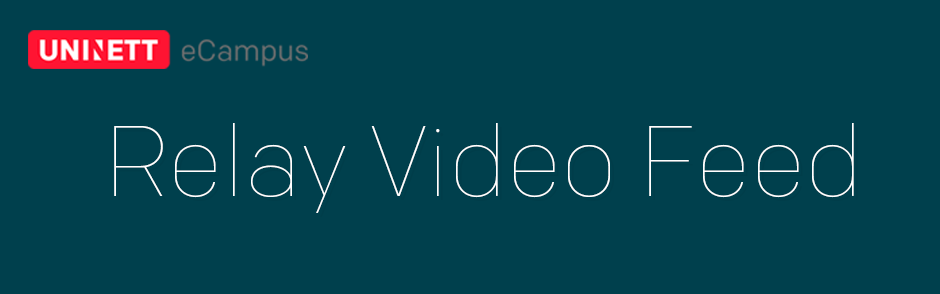
<style>
.page{position:relative;width:940px;height:294px;background:#00404d}
.page>*{position:absolute;margin:0}
.t1{font:100px "Colfax-Thin";color:#ffffff}
</style>
<div class="page">
<p class="t1" style="left:114px;top:123px;width:740px;height:90px">Relay Video Feed</p>
</div>
